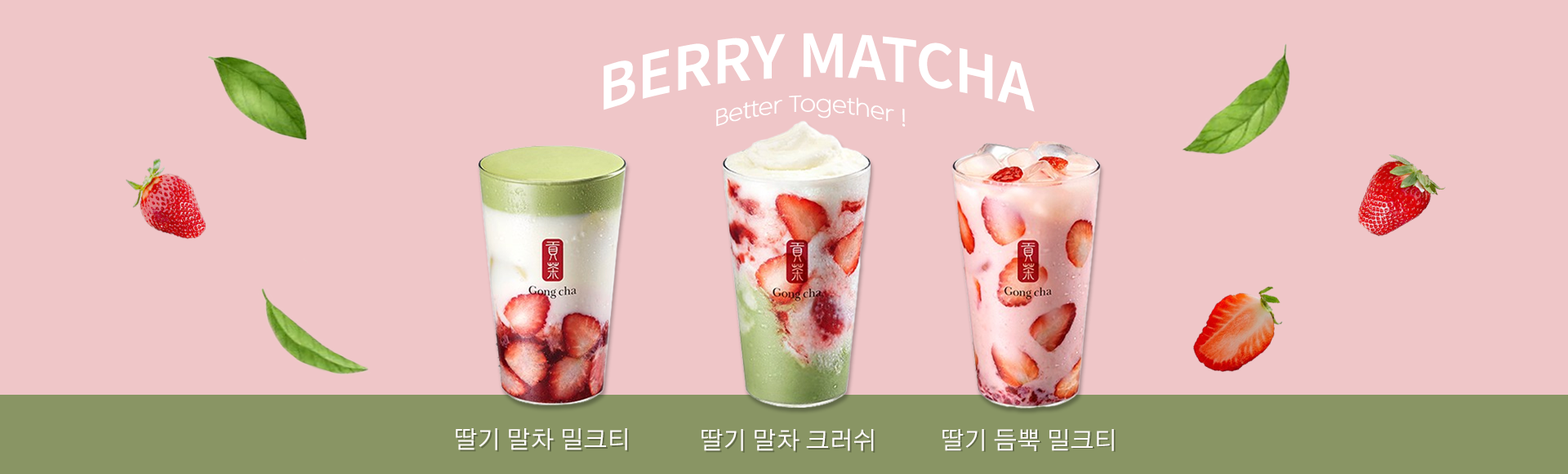
<style>
.page{position:relative;width:1568px;height:474px;background:#efc6c8}
.page>*{position:absolute;margin:0}
.t1{font:58.8px "NotoSansKR-SemiBold";color:#ffffff}
.t2{font:24.5px "Cafe24Simplehae";color:#ffffff}
.t3{font:24.5px "GothicA1-Regular";color:#fffbfb}
.t4{font:24.5px "GothicA1-Regular";color:#616a46}
</style>
<div class="page">
<p class="t1" style="left:604px;top:33px;width:431px;height:79px">BERRY MATCHA</p>
<p class="t2" style="left:716px;top:95px;width:190px;height:32px">Better Together !</p>
<p class="t3" style="left:456px;top:428px;width:171px;height:22px">딸기 말차 밀크티</p>
<p class="t4" style="left:457px;top:430px;width:172px;height:22px">딸기 말차 밀크티</p>
<p class="t3" style="left:702px;top:428px;width:172px;height:23px">딸기 말차 크러쉬</p>
<p class="t4" style="left:703px;top:430px;width:172px;height:22px">딸기 말차 크러쉬</p>
<p class="t3" style="left:942px;top:429px;width:172px;height:22px">딸기 듬뿍 밀크티</p>
</div>
